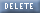
<style>
.page{position:relative;width:40px;height:13px}
.page>*{position:absolute;margin:0}
.t1{font:8px "LetterGothic-Bold";color:#ffffff}
</style>
<div class="page">
<p class="t1" style="left:5px;top:3px;width:28px;height:6px">DELETE</p>
</div>
